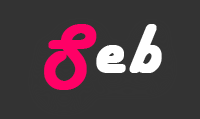
<style>
.page{position:relative;width:200px;height:119px;background:#333333}
.page>*{position:absolute;margin:0}
.t1{font:72px "HarlowSolid";letter-spacing:0.05em;color:#ffffff;font-weight:bold}
.t2{font:72px "HarlowSolid";letter-spacing:0.05em;color:#ff0066;font-weight:bold}
</style>
<div class="page">
<p class="t1" style="left:44px;top:24px;width:118px;height:66px"><span class="t2">S</span>eb</p>
</div>
